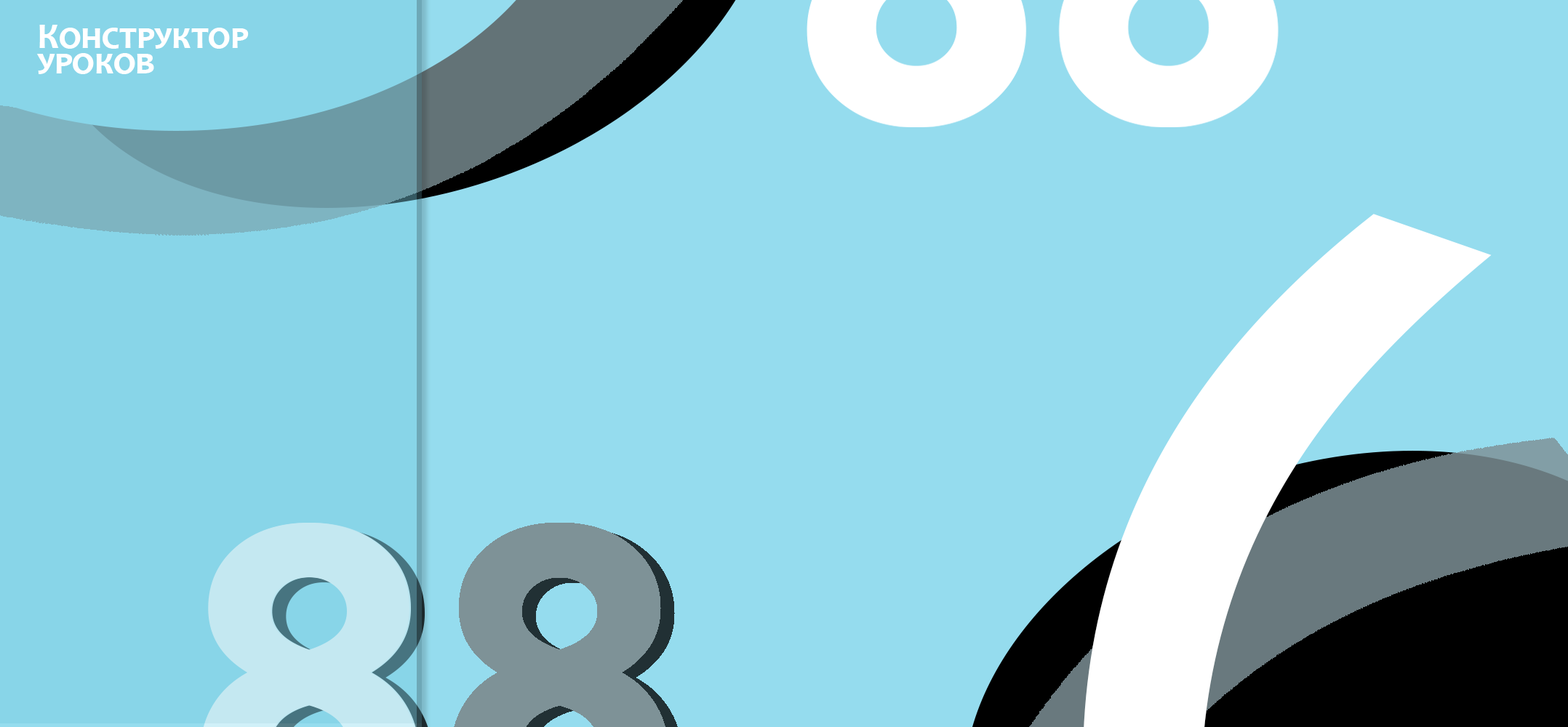
<style>
.page{position:relative;width:1568px;height:727px;background:#95dcee}
.page>*{position:absolute;margin:0}
.t1{font:36.8px/6.3px "Candara-Bold";color:#ffffff;font-variant:small-caps}
</style>
<div class="page">
<p class="t1" style="left:37px;top:25px;width:212px;height:49px">Конструктор <br><br><br><br>уроков</p>
</div>
